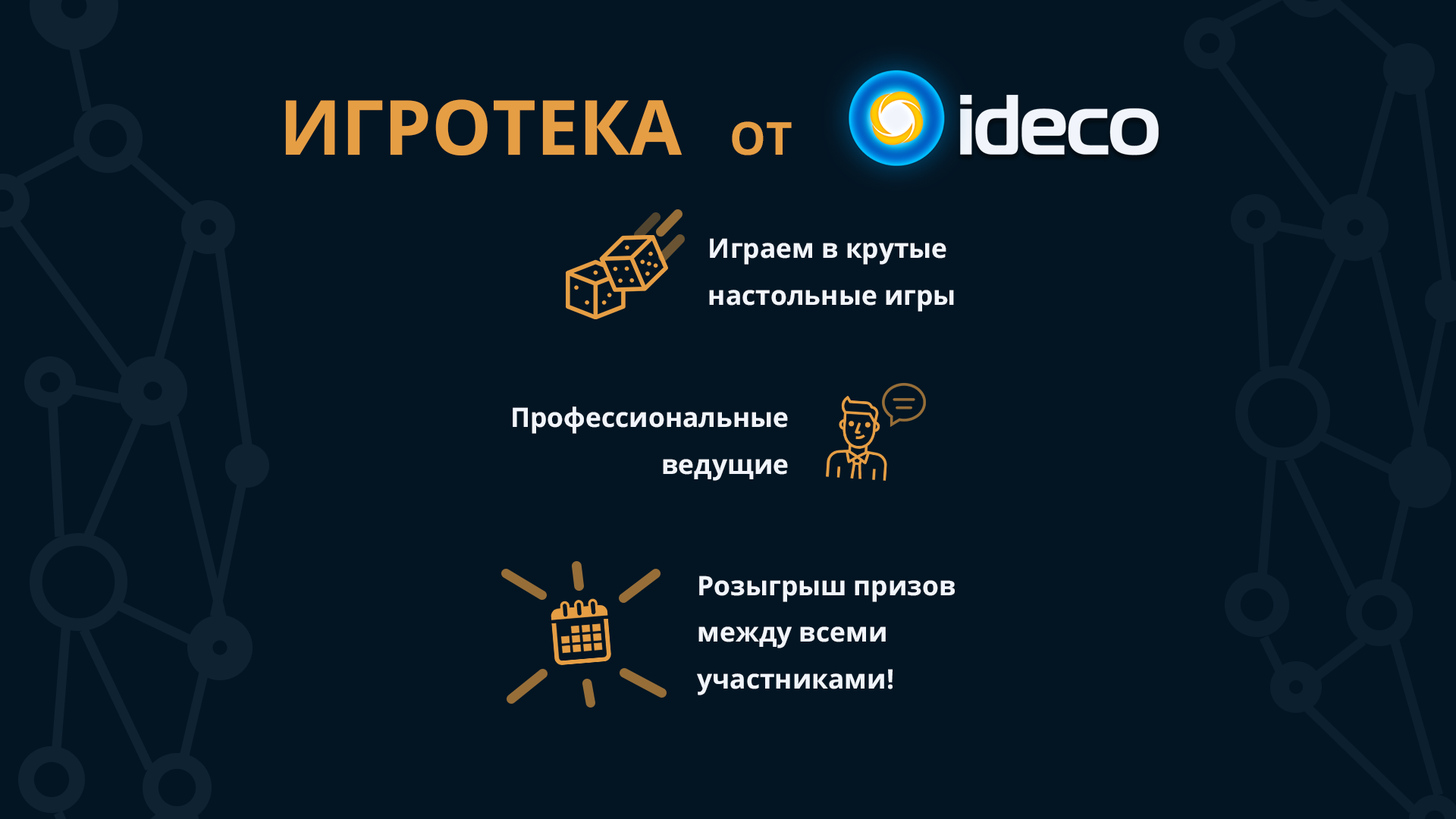
<style>
.page{position:relative;width:1456px;height:819px;background:#031523}
.page>*{position:absolute;margin:0}
.t1{font:75.8px "OpenSans-Bold";color:#e69e44;text-transform:uppercase}
.t2{font:45.5px "OpenSans-Bold";color:#e69e44;text-transform:uppercase}
.t3{font:26.8px/46.8px "OpenSans-Bold";color:#f1f5fb}
</style>
<div class="page">
<p class="t1" style="left:285px;top:99px;width:397px;height:56px">Игротека</p>
<p class="t2" style="left:732px;top:121px;width:60px;height:34px">от</p>
<p class="t3" style="left:709px;top:238px;width:245px;height:74px">Играем в крутые <br>настольные игры</p>
<p class="t3" style="left:513px;top:406px;width:275px;height:75px;text-align:right">Профессиональные<br>ведущие</p>
<p class="t3" style="left:697px;top:576px;width:258px;height:119px">Розыгрыш призов <br>между всеми <br>участниками!</p>
</div>
